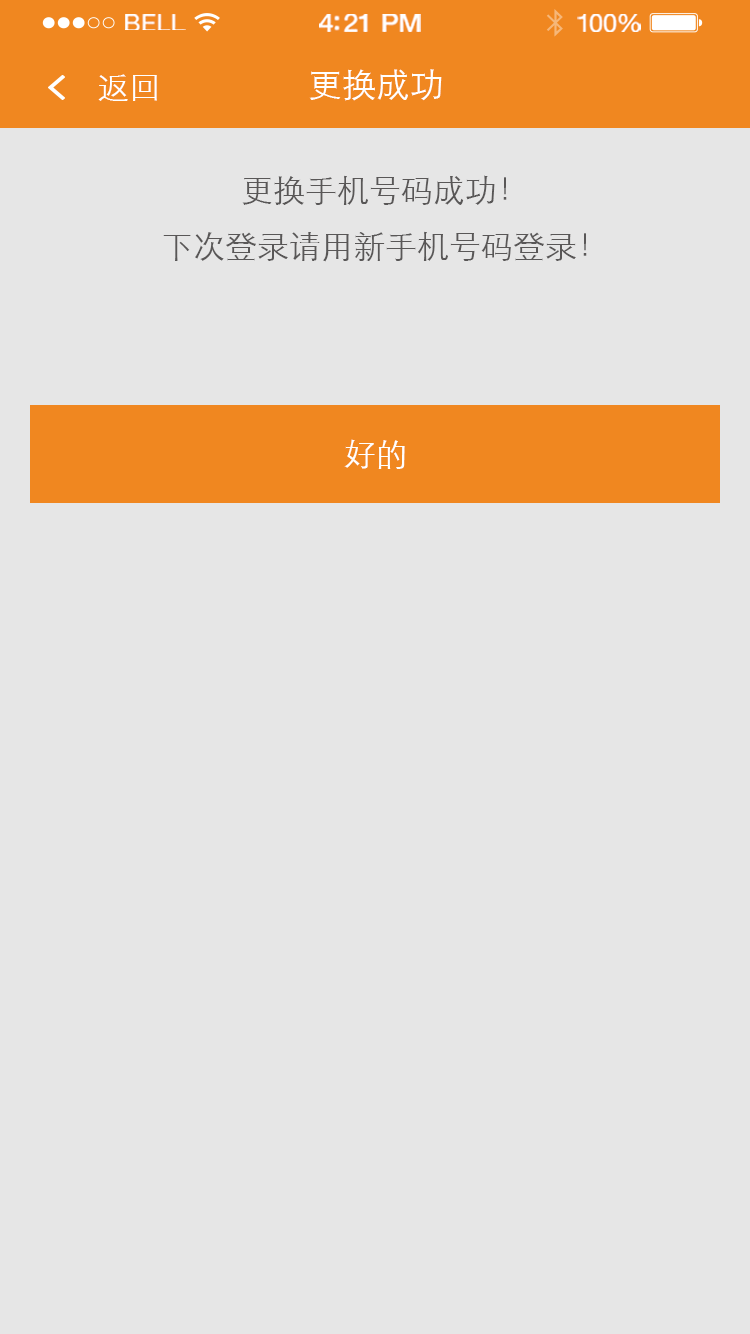
<style>
.page{position:relative;width:750px;height:1334px;background:#e6e6e6}
.page>*{position:absolute;margin:0}
.t1{font:23.3px "HelveticaNeue";letter-spacing:0.02em;color:#ffffff;scale:1.06 1}
.t2{font:25.3px "HelveticaNeue-Medium";letter-spacing:-0.02em;color:#ffffff;scale:1.06 1}
.t3{font:24.3px "HelveticaNeue";letter-spacing:-0.02em;color:#ffffff;scale:1.06 1}
.t4{font:32px "STXihei";color:#ffffff}
.t5{font:34px "STXihei";color:#ffffff}
.t6{font:32px/56px "STXihei";color:#595757}
</style>
<div class="page">
<p class="t1" style="left:125px;top:14px;width:61px;height:16px">BELL</p>
<p class="t2" style="left:319px;top:14px;width:102px;height:18px">4:21 PM</p>
<p class="t3" style="left:577px;top:14px;width:64px;height:18px">100%</p>
<p class="t4" style="left:98px;top:74px;width:59px;height:27px">返回</p>
<p class="t5" style="left:309px;top:69px;width:133px;height:32px">更换成功</p>
<p class="t6" style="left:163px;top:175px;width:424px;height:87px;text-align:center">更换手机号码成功！<br>下次登录请用新手机号码登录！</p>
<p class="t4" style="left:344px;top:439px;width:61px;height:30px">好的</p>
</div>
